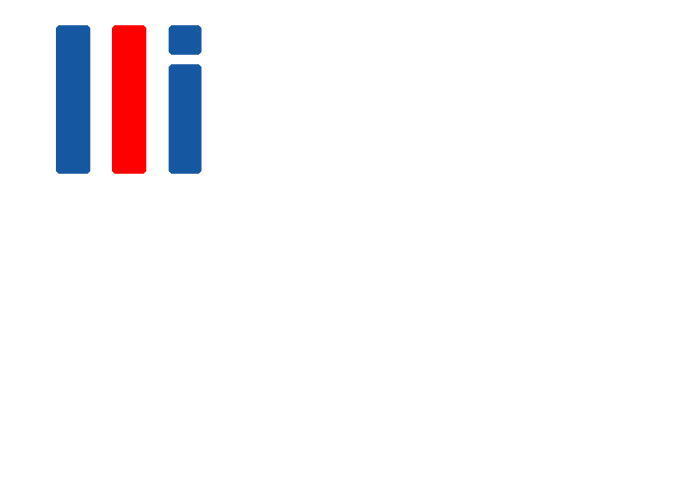
<style>
.page{position:relative;width:700px;height:500px;background:#ffffff}
.page>*{position:absolute;margin:0}
.t1{font:200px "Arial-BoldMT";letter-spacing:-0.025em;color:#1557a1;font-weight:bold}
.t2{font:200px "Arial-BoldMT";letter-spacing:-0.025em;color:#ff0000;font-weight:bold}
</style>
<div class="page">
<p class="t1" style="left:55px;top:25px;width:147px;height:149px">I<span class="t2">I</span>i</p>
</div>
